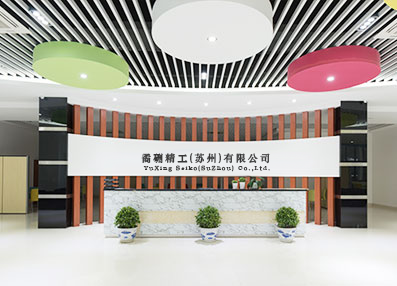
<style>
.page{position:relative;width:397px;height:286px}
.page>*{position:absolute;margin:0}
.t1{font:10px "STZhongsong";letter-spacing:0.18em;color:#373737;font-weight:bold}
.t2{font:6px "STZhongsong";letter-spacing:0.18em;color:#373737;font-weight:bold}
</style>
<div class="page">
<p class="t1" style="left:141px;top:153px;width:129px;height:11px">矞硎精工(苏州)有限公司</p>
<p class="t2" style="left:143px;top:165px;width:127px;height:7px">YuXing Seiko(SuZhou) Co.,Ltd.</p>
</div>
